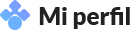
<style>
.page{position:relative;width:133px;height:30px;background:#ffffff}
.page>*{position:absolute;margin:0}
.t1{font:24px "Lato-Black";color:#222222}
</style>
<div class="page">
<p class="t1" style="left:39px;top:7px;width:91px;height:22px">Mi perfil</p>
</div>
